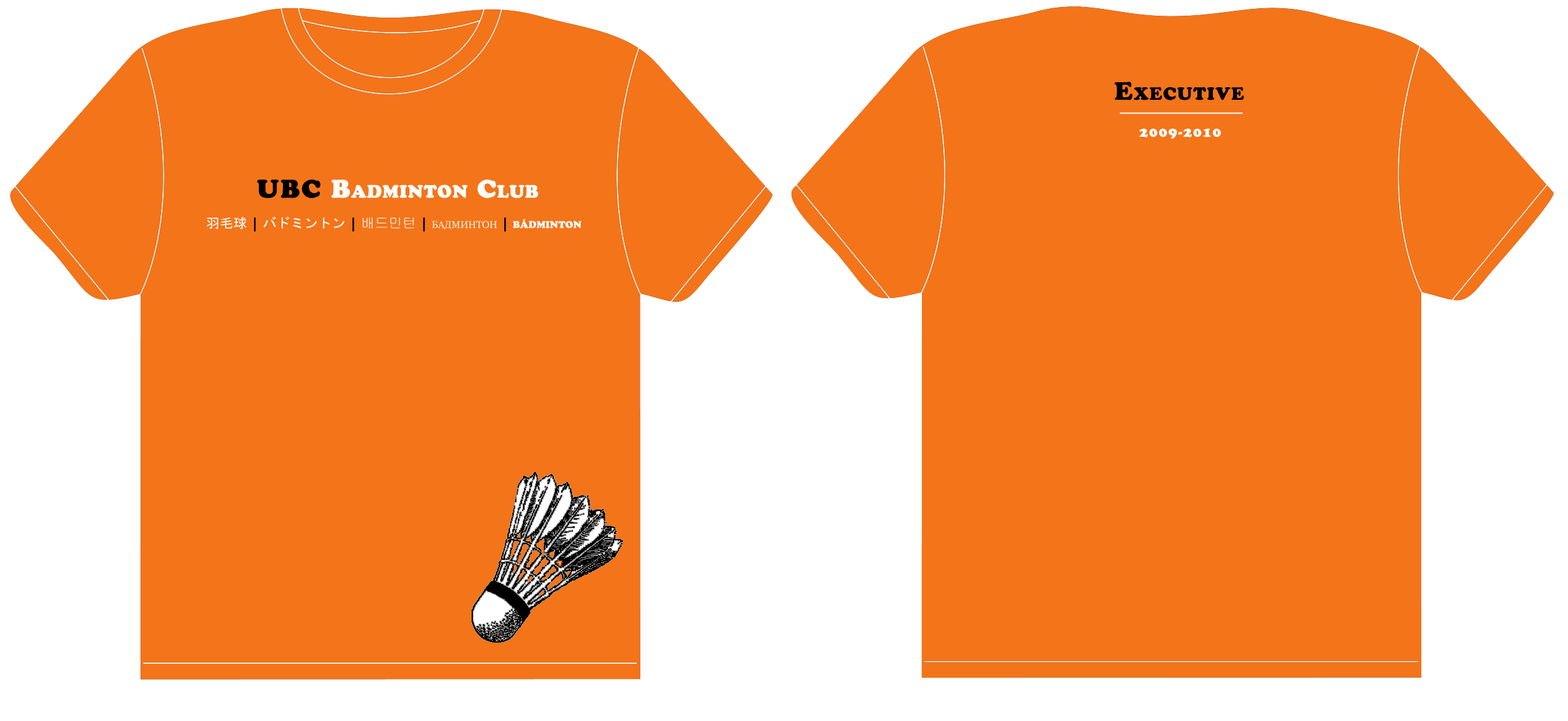
<style>
.page{position:relative;width:1568px;height:721px;background:#f47419}
.page>*{position:absolute;margin:0}
.t1{font:25.1px "CooperBlackStd";letter-spacing:0.05em;color:#000000;font-variant:small-caps}
.t2{font:13.8px "CooperBlackStd";letter-spacing:0.075em;color:#ffffff;font-variant:small-caps}
.t3{font:25.1px "CooperBlackStd";letter-spacing:0.01em;color:#ffffff;font-variant:small-caps;font-weight:bold}
.t4{font:25.1px "CooperBlackStd";letter-spacing:0.05em;color:#000000;font-variant:small-caps;font-weight:bold}
.t5{font:13.8px "Georgia";color:#fdfafa;font-variant:small-caps}
.t6{font:13.8px "MS-Gothic";color:#fdfafa;font-variant:small-caps}
.t7{font:13.8px "CooperBlackStd";color:#000000;font-variant:small-caps}
.t8{font:13.8px "Gulim";color:#fdfafa;font-variant:small-caps}
.t9{font:13.8px "CooperBlackStd";color:#fdfafa;font-variant:small-caps}
</style>
<div class="page">
<p class="t1" style="left:1115px;top:82px;width:129px;height:18px">Executive</p>
<p class="t2" style="left:1139px;top:129px;width:82px;height:10px">2009-2010</p>
<p class="t3" style="left:257px;top:179px;width:282px;height:19px"><span class="t4">UBC </span>Badminton Club</p>
<p class="t5" style="left:206px;top:216px;width:375px;height:15px"><span class="t6">羽毛球 </span><span class="t7">| </span><span class="t6">バドミントン</span><span class="t7"> | </span><span class="t8">배드민턴 </span><span class="t7">| </span>бадминтон<span class="t7"> |</span><span class="t9"> bádminton</span></p>
</div>
